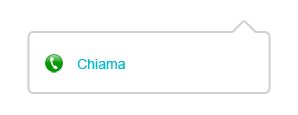
<style>
.page{position:relative;width:298px;height:115px;background:#ffffff}
.page>*{position:absolute;margin:0}
.t1{font:14px "ArialMT";color:#00b9ca}
</style>
<div class="page">
<p class="t1" style="left:77px;top:59px;width:48px;height:10px">Chiama</p>
</div>
